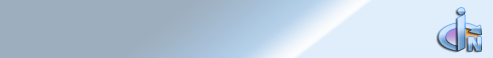
<style>
.page{position:relative;width:493px;height:58px;background:#9dafbf}
.page>*{position:absolute;margin:0}
.t1{font:19.8px "FrutigerLT-Black";letter-spacing:-0.085em}
</style>
<div class="page">
<p class="t1" style="left:468px;top:37px;width:13px;height:14px">N</p>
</div>
